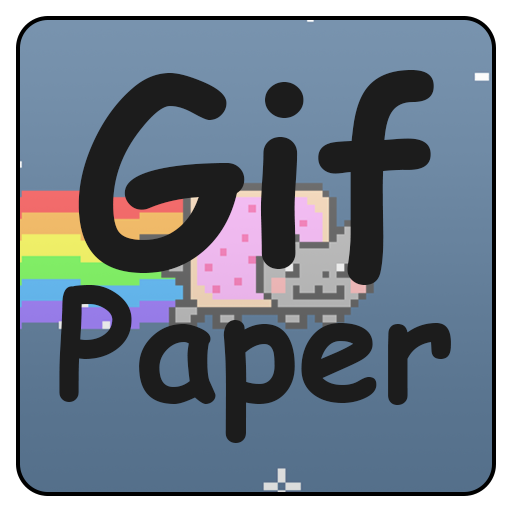
<style>
.page{position:relative;width:512px;height:512px}
.page>*{position:absolute;margin:0}
.t1{font:250px "ComicSansMS-Bold";color:#1c1c1c}
.t2{font:150px "ComicSansMS-Bold";color:#1c1c1c}
</style>
<div class="page">
<p class="t1" style="left:78px;top:70px;width:356px;height:215px">Gif</p>
<p class="t2" style="left:59px;top:285px;width:392px;height:158px">Paper</p>
</div>
